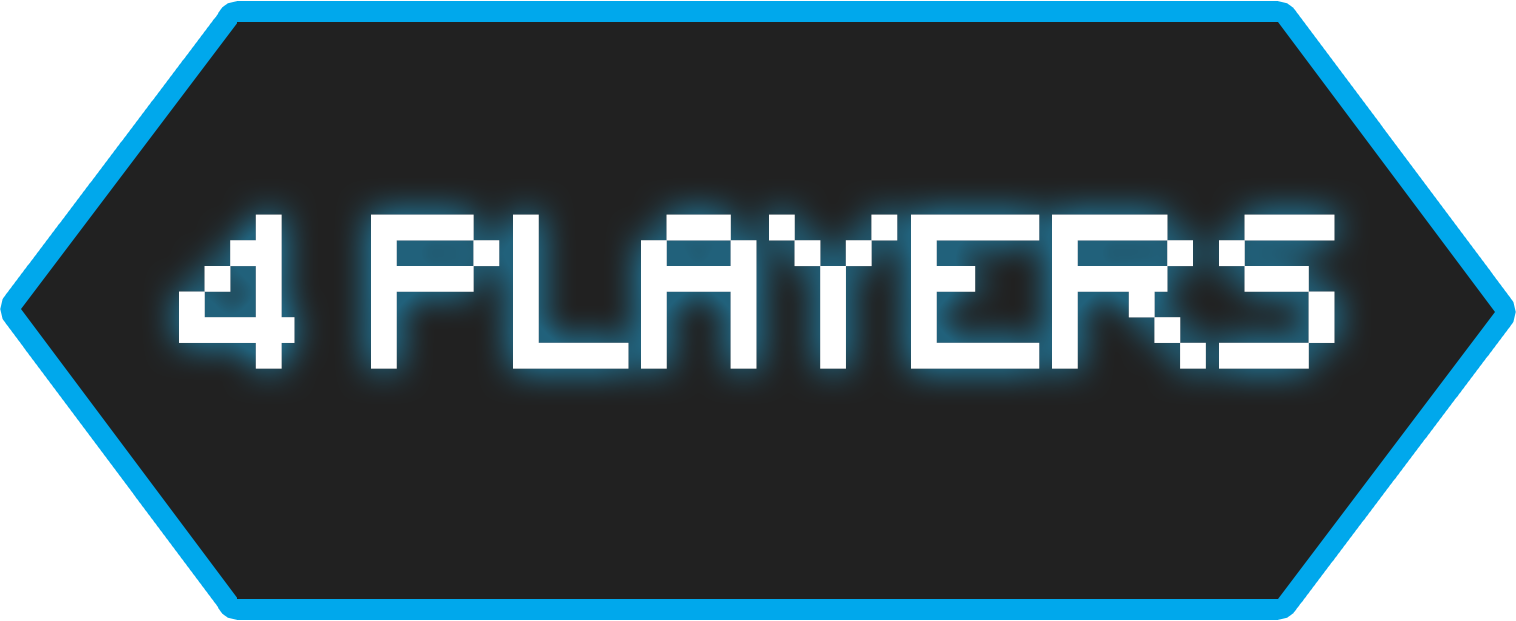
<style>
.page{position:relative;width:1516px;height:621px;background:#212121}
.page>*{position:absolute;margin:0}
.t1{font:205.3px "Minecraft";color:#ffffff}
</style>
<div class="page">
<p class="t1" style="left:179px;top:214px;width:1156px;height:155px">4 PLAYERS</p>
</div>
